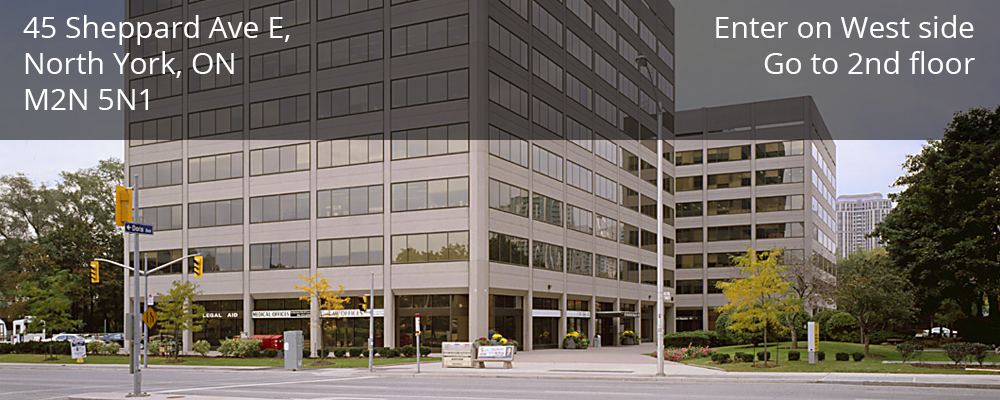
<style>
.page{position:relative;width:1000px;height:400px}
.page>*{position:absolute;margin:0}
.t1{font:30px "OpenSans";color:#ffffff}
</style>
<div class="page">
<p class="t1" style="left:23px;top:15px;width:267px;height:95px">45 Sheppard Ave E, <br>North York, ON <br>M2N 5N1</p>
<p class="t1" style="left:716px;top:15px;width:259px;height:59px;text-align:right">Enter on West side <br>Go to 2nd floor</p>
</div>
